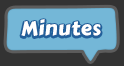
<style>
.page{position:relative;width:124px;height:66px;background:#74b7d7}
.page>*{position:absolute;margin:0}
.t1{font:20px "CarterOne";letter-spacing:0.025em;color:#ffffff}
</style>
<div class="page">
<p class="t1" style="left:21px;top:19px;width:80px;height:17px">Minutes</p>
</div>
